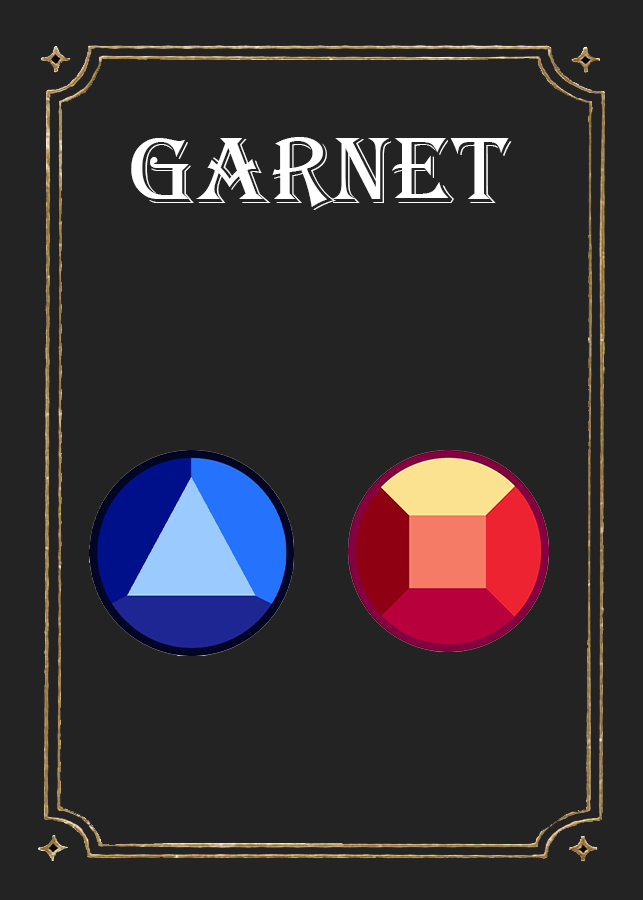
<style>
.page{position:relative;width:643px;height:900px;background:#232323}
.page>*{position:absolute;margin:0}
.t1{font:98.3px "Algerian";color:#ffffff}
</style>
<div class="page">
<p class="t1" style="left:131px;top:137px;width:381px;height:73px">Garnet</p>
</div>
